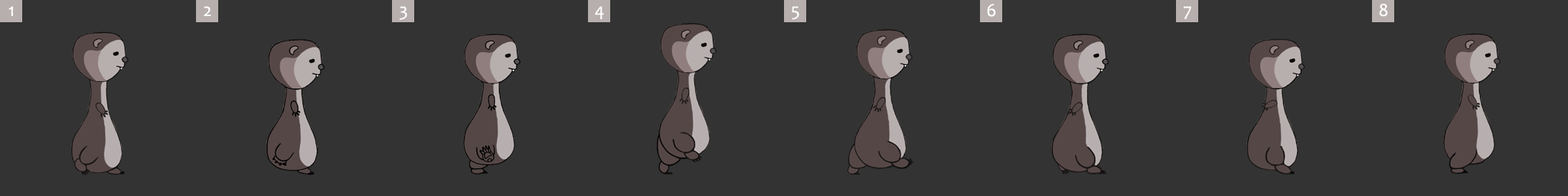
<style>
.page{position:relative;width:1568px;height:196px;background:#333333}
.page>*{position:absolute;margin:0}
.t1{font:18.4px "Candara";color:#fffefe}
</style>
<div class="page">
<p class="t1" style="left:987px;top:4px;width:9px;height:13px">6</p>
<p class="t1" style="left:1379px;top:3px;width:9px;height:14px">8</p>
<p class="t1" style="left:8px;top:6px;width:5px;height:10px">1</p>
<p class="t1" style="left:204px;top:6px;width:7px;height:10px">2</p>
<p class="t1" style="left:399px;top:6px;width:8px;height:14px">3</p>
<p class="t1" style="left:595px;top:6px;width:9px;height:13px">4</p>
<p class="t1" style="left:792px;top:6px;width:7px;height:14px">5</p>
<p class="t1" style="left:1184px;top:6px;width:7px;height:13px">7</p>
</div>
